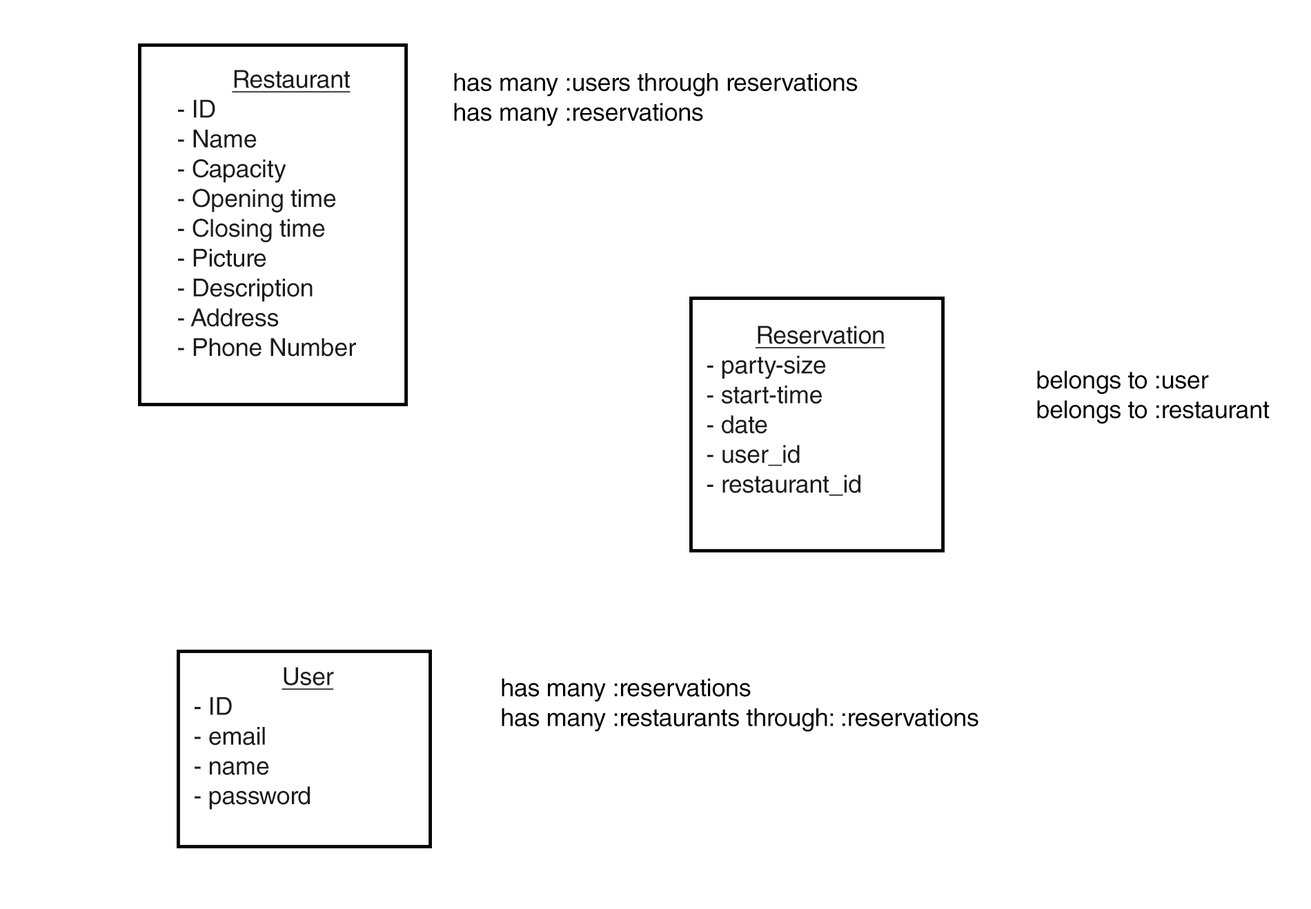
<style>
.page{position:relative;width:1311px;height:909px;background:#ffffff}
.page>*{position:absolute;margin:0}
.t1{font:24.8px "HelveticaLTStd-Roman";letter-spacing:-0.01em;color:#1b1b1b}
.t2{font:24.8px "HelveticaLTStd-Roman";letter-spacing:-0.01em;color:#1b1b1b;text-decoration:underline}
.t3{font:24.8px "HelveticaLTStd-Roman";letter-spacing:-0.01em;color:#000000}
</style>
<div class="page">
<p class="t1" style="left:178px;top:70px;width:178px;height:287px;text-align:center"><span class="t2">Restaurant<br></span>- ID<br>- Name<br>- Capacity<br>- Opening time<br>- Closing time<br>- Picture<br>- Description<br>- Address<br>- Phone Number</p>
<p class="t3" style="left:454px;top:73px;width:404px;height:53px">has many :users through reservations<br>has many :reservations</p>
<p class="t1" style="left:707px;top:326px;width:178px;height:170px;text-align:center"><span class="t2">Reservation<br></span>- party-size<br>- start-time<br>- date<br>- user_id<br>- restaurant_id</p>
<p class="t3" style="left:1037px;top:371px;width:233px;height:53px">belongs to :user<br>belongs to :restaurant</p>
<p class="t1" style="left:195px;top:667px;width:139px;height:143px;text-align:center"><span class="t2">User<br></span>- ID<br>- email<br>- name<br>- password</p>
<p class="t3" style="left:502px;top:678px;width:476px;height:54px">has many :reservations<br>has many :restaurants through: :reservations</p>
</div>
